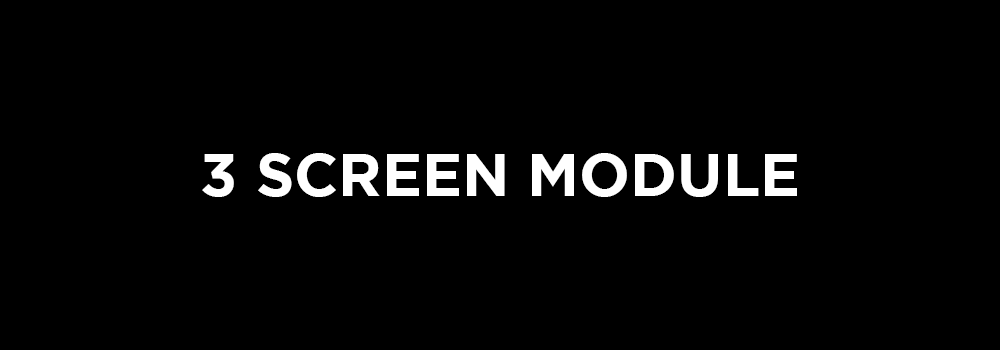
<style>
.page{position:relative;width:1000px;height:350px;background:#000000}
.page>*{position:absolute;margin:0}
.t1{font:60px "GothamBold";color:#ffffff}
</style>
<div class="page">
<p class="t1" style="left:202px;top:153px;width:595px;height:44px">3 SCREEN MODULE</p>
</div>
